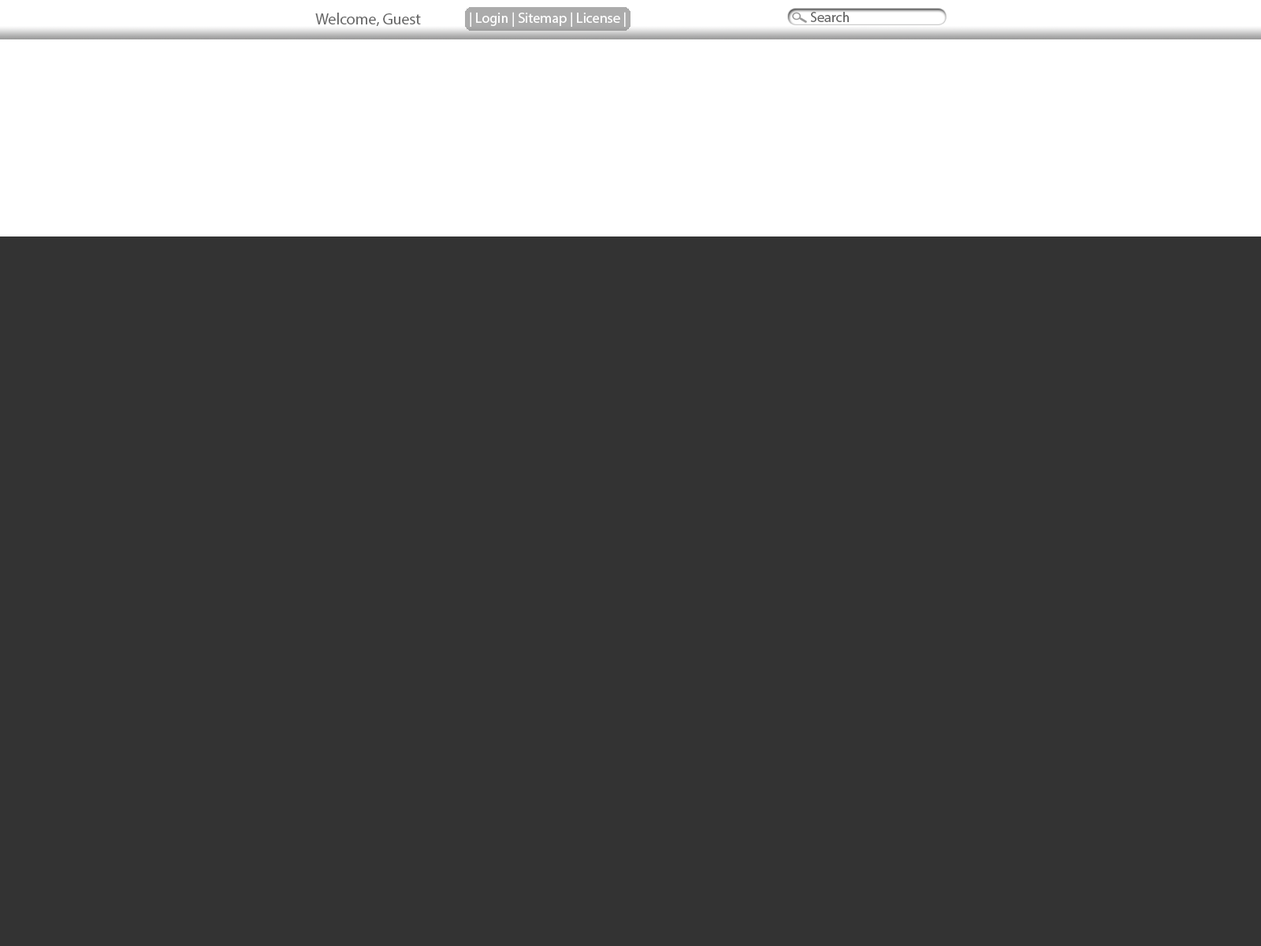
<style>
.page{position:relative;width:1261px;height:946px;background:#333333}
.page>*{position:absolute;margin:0}
.t1{font:15.8px "MyriadPro-Regular";color:#666666}
.t2{font:14.2px "MyriadPro-Regular";color:#ffffff}
.t3{font:14.2px "MyriadPro-Regular";color:#666666}
</style>
<div class="page">
<p class="t1" style="left:315px;top:13px;width:106px;height:13px">Welcome, Guest</p>
<p class="t2" style="left:470px;top:12px;width:156px;height:15px">| Login | Sitemap | License |</p>
<p class="t3" style="left:810px;top:12px;width:39px;height:10px">Search</p>
</div>
